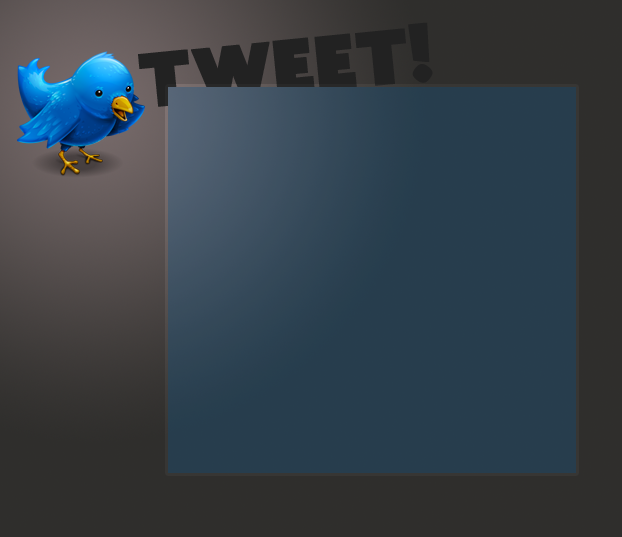
<style>
.page{position:relative;width:622px;height:537px;background:#273d4d}
.page>*{position:absolute;margin:0}
.t1{font:142.6px "Agenda-Black";color:#222222;text-transform:uppercase;font-weight:bold}
</style>
<div class="page">
<p class="t1" style="left:138px;top:22px;width:295px;height:85px;rotate:-6deg">Tweet!</p>
</div>
